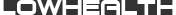
<style>
.page{position:relative;width:176px;height:15px;background:#ffffff}
.page>*{position:absolute;margin:0}
.t1{font:30px "Bitsumishi";color:#ffffff}
</style>
<div class="page">
<p class="t1" style="left:0px;top:0px;width:177px;height:15px">lowhealth</p>
</div>
